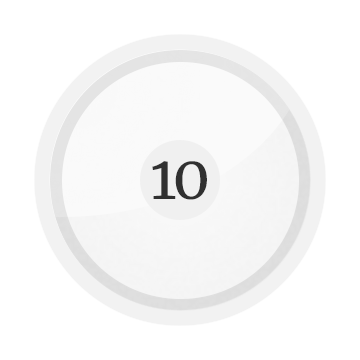
<style>
.page{position:relative;width:360px;height:360px;background:#ffffff}
.page>*{position:absolute;margin:0}
.t1{font:60px "Merriweather-Regular";letter-spacing:-0.06em;color:#303030}
</style>
<div class="page">
<p class="t1" style="left:152px;top:161px;width:55px;height:39px">10</p>
</div>
